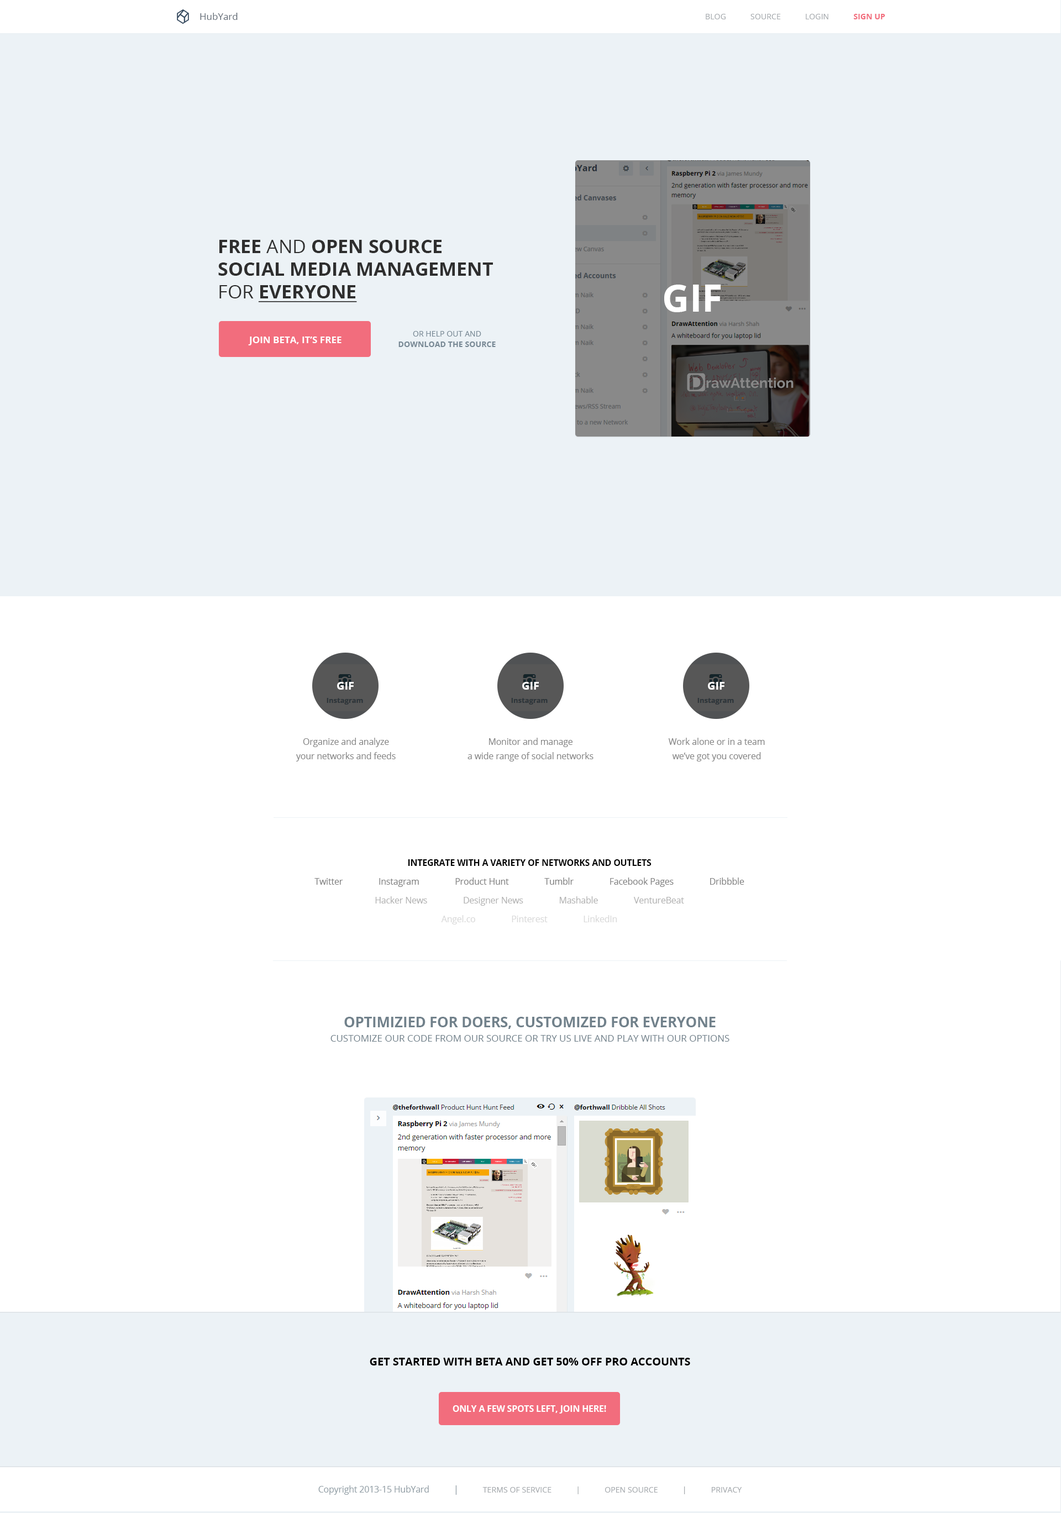
<style>
.page{position:relative;width:1061px;height:1513px;background:#ffffff}
.page>*{position:absolute;margin:0}
.t1{font:9.4px "OpenSans";color:#636c76}
.t2{font:7.8px "OpenSans";color:#a6aaae;text-transform:uppercase}
.t3{font:7.8px "OpenSans-Bold";color:#f26d7d;text-transform:uppercase}
.t4{font:18.8px "OpenSans-Bold";color:#2e2e2e;text-transform:uppercase}
.t5{font:18.8px "OpenSans";color:#2e2e2e;text-transform:uppercase}
.t6{font:18.8px "OpenSans-Bold";color:#2e2e2e;text-transform:uppercase;text-decoration:underline}
.t7{font:37.6px "OpenSans-Bold";color:#ffffff;text-transform:uppercase}
.t8{font:9.4px "OpenSans-Bold";color:#ffffff;text-transform:uppercase}
.t9{font:7.8px "OpenSans-Bold";color:#788995;text-transform:uppercase}
.t10{font:7.8px "OpenSans";color:#788995;text-transform:uppercase}
.t11{font:11px "OpenSans-Bold";color:#ffffff}
.t12{font:8.6px/14.1px "OpenSans";color:#888888}
.t13{font:8.6px/18.8px "OpenSans";color:#838383}
.t14{font:8.6px/18.8px "OpenSans-Bold";color:#000000}
.t15{font:8.6px/18.8px "OpenSans";color:#b4b4b4}
.t16{font:8.6px/18.8px "OpenSans";color:#d9d9d9}
.t17{font:9.4px/14.1px "OpenSans";color:#71818b;text-transform:uppercase}
.t18{font:14.1px/14.1px "OpenSans-Bold";color:#71818b;text-transform:uppercase}
.t19{font:11px "OpenSans-Bold";color:#000000;text-transform:uppercase}
.t20{font:8.6px "OpenSans-Bold";color:#ffffff;text-transform:uppercase}
.t21{font:8.6px "OpenSans";color:#96a2a9}
.t22{font:8.6px "OpenSans";color:#96a2a9;text-transform:uppercase}
</style>
<div class="page">
<p class="t1" style="left:200px;top:13px;width:38px;height:7px">HubYard</p>
<p class="t2" style="left:705px;top:14px;width:180px;height:5px">BLOG            Source            Login            <span class="t3">SIGN UP</span></p>
<p class="t4" style="left:218px;top:240px;width:275px;height:62px">Free<span class="t5"> and </span>Open Source<br>Social Media Management<span class="t5"><br>for </span><span class="t6">everyone</span></p>
<p class="t7" style="left:664px;top:285px;width:56px;height:27px">GIF</p>
<p class="t8" style="left:248px;top:336px;width:93px;height:9px">Join Beta, it’s Free</p>
<p class="t9" style="left:398px;top:341px;width:98px;height:6px">Download the Source</p>
<p class="t10" style="left:413px;top:331px;width:68px;height:5px">or help out and</p>
<p class="t11" style="left:337px;top:682px;width:17px;height:7px">GIF</p>
<p class="t11" style="left:522px;top:682px;width:17px;height:7px">GIF</p>
<p class="t11" style="left:708px;top:682px;width:16px;height:7px">GIF</p>
<p class="t12" style="left:296px;top:737px;width:100px;height:24px;text-align:center">Organize and analyze<br>your networks and feeds</p>
<p class="t12" style="left:467px;top:737px;width:126px;height:24px;text-align:center">Monitor and manage<br>a wide range of social networks</p>
<p class="t12" style="left:668px;top:737px;width:97px;height:24px;text-align:center">Work alone or in a team<br>we’ve got you covered</p>
<p class="t13" style="left:314px;top:859px;width:430px;height:65px;text-align:center"><span class="t14">INTEGRATE WITH A VARIETY OF NETWORKS AND OUTLETS<br></span>Twitter                Instagram                Product Hunt                Tumblr                Facebook Pages                Dribbble<br><span class="t15">Hacker News                Designer News                Mashable                VentureBeat<br></span><span class="t16">Angel.co                Pinterest                LinkedIn</span></p>
<p class="t17" style="left:330px;top:1016px;width:399px;height:25px;text-align:center"><span class="t18">Optimizied for Doers, Customized For everyone<br></span>Customize our code from our source or try us live and play with our options</p>
<p class="t19" style="left:370px;top:1357px;width:320px;height:8px">Get Started with beta and get 50% off Pro Accounts</p>
<p class="t20" style="left:452px;top:1405px;width:154px;height:8px">Only a few spots left, join Here!</p>
<p class="t2" style="left:318px;top:1485px;width:424px;height:9px"><span class="t21">Copyright </span><span class="t22">2013-15 </span><span class="t21">HubYard            |</span>            Terms of Service            |            Open Source            |            Privacy</p>
</div>
